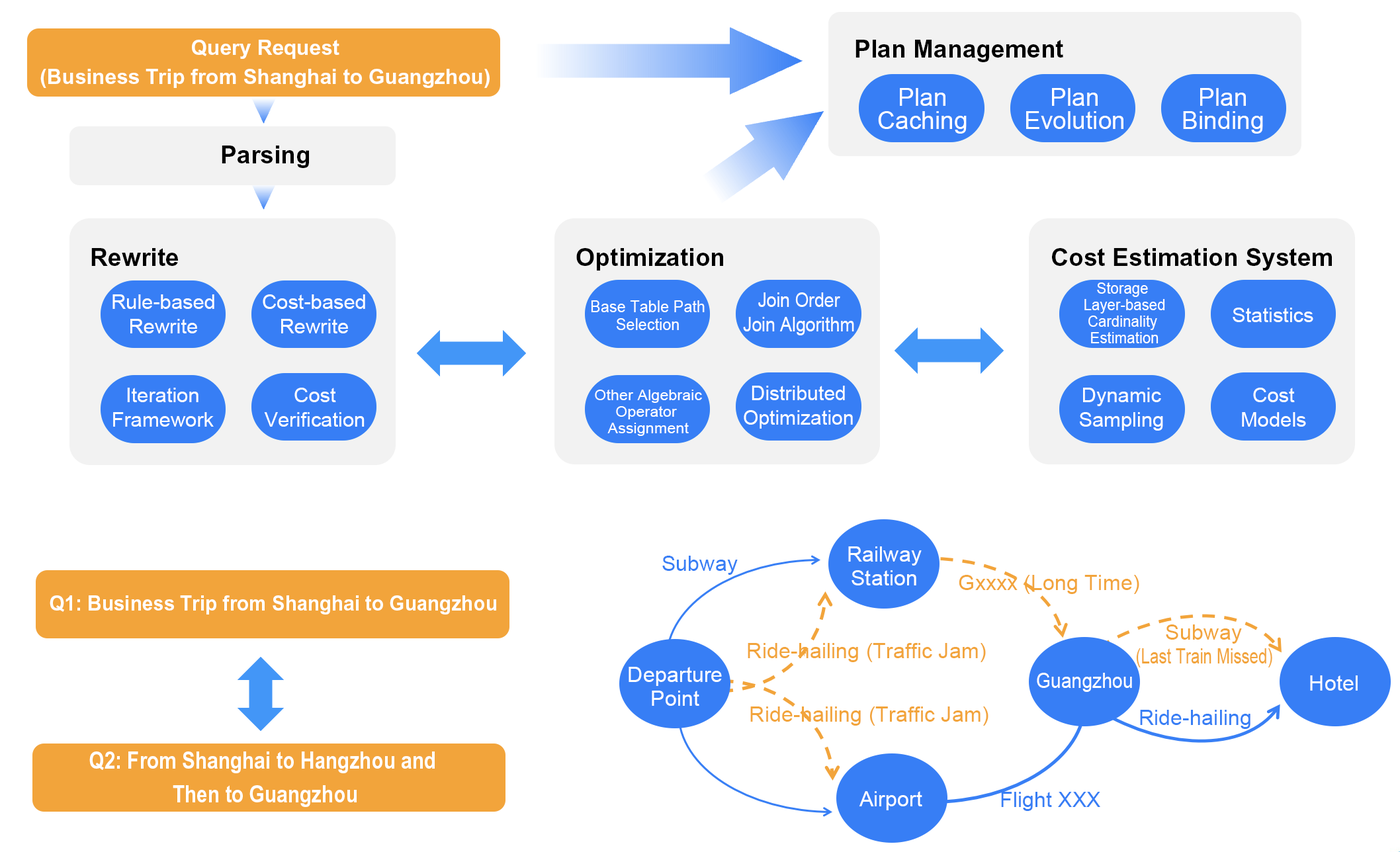
<style>
.page{position:relative;width:1400px;height:852px;background:#ffffff}
.page>*{position:absolute;margin:0}
.t1{font:20.9px/28.6px "Arial-BoldMT";color:#ffffff}
.t2{font:24.7px "Arial-BoldMT";color:#000000}
.t3{font:24.7px/23px "ArialMT";color:#ffffff}
.t4{font:20.4px/24.5px "ArialMT";color:#ffffff;scale:0.86 1}
.t5{font:15.2px/16.5px "ArialMT";color:#ffffff;scale:0.97 1}
.t6{font:20.4px/24.5px "ArialMT";color:#ffffff}
.t7{font:16.5px/17.9px "ArialMT";color:#ffffff;scale:0.94 1}
.t8{font:20.4px "ArialMT";color:#ffffff}
.t9{font:14.6px/16.5px "ArialMT";color:#ffffff;scale:1.07 1}
.t10{font:21.5px "ArialMT";color:#377ef5}
.t11{font:21.5px/23.6px "ArialMT";color:#ffffff}
.t12{font:21.5px "ArialMT";color:#f2a43b}
.t13{font:20.9px "Arial-BoldMT";color:#ffffff;scale:0.94 1}
.t14{font:21.5px "ArialMT";color:#f2a43b;scale:0.75 1}
.t15{font:21.5px "ArialMT";color:#ffffff;scale:0.88 1}
.t16{font:21.5px "ArialMT";color:#ffffff}
.t17{font:23.7px/33.5px "Arial-BoldMT";color:#ffffff;scale:0.83 1}
</style>
<div class="page">
<p class="t1" style="left:40px;top:40px;width:449px;height:49px;text-align:center">Query Request<br>(Business Trip from Shanghai to Guangzhou)</p>
<p class="t2" style="left:855px;top:40px;width:208px;height:22px">Plan Management</p>
<p class="t3" style="left:878px;top:88px;width:88px;height:46px;text-align:center">Plan<br>Caching</p>
<p class="t3" style="left:1026px;top:88px;width:97px;height:41px;text-align:center">Plan<br>Evolution</p>
<p class="t3" style="left:1183px;top:88px;width:80px;height:46px;text-align:center">Plan<br>Binding</p>
<p class="t2" style="left:222px;top:146px;width:87px;height:22px">Parsing</p>
<p class="t2" style="left:91px;top:248px;width:87px;height:18px">Rewrite</p>
<p class="t2" style="left:576px;top:248px;width:147px;height:23px">Optimization</p>
<p class="t2" style="left:1052px;top:248px;width:280px;height:23px">Cost Estimation System</p>
<p class="t4" style="left:743px;top:292px;width:111px;height:43px;text-align:center">Join Order<br>Join Algorithm</p>
<p class="t5" style="left:1084px;top:282px;width:81px;height:61px;text-align:center">Storage <br>Layer-based<br>Cardinality <br>Estimation</p>
<p class="t6" style="left:112px;top:294px;width:102px;height:39px;text-align:center">Rule-based<br>Rewrite</p>
<p class="t6" style="left:263px;top:294px;width:102px;height:39px;text-align:center">Cost-based<br>Rewrite</p>
<p class="t7" style="left:591px;top:300px;width:113px;height:30px;text-align:center">Base Table Path<br>Selection</p>
<p class="t8" style="left:1232px;top:308px;width:81px;height:14px">Statistics</p>
<p class="t6" style="left:113px;top:388px;width:101px;height:39px;text-align:center">Iteration<br>Framework</p>
<p class="t6" style="left:264px;top:388px;width:100px;height:39px;text-align:center">Cost<br>Verification</p>
<p class="t9" style="left:595px;top:390px;width:107px;height:46px;text-align:center">Other Algebraic<br>Operator <br>Assignment</p>
<p class="t6" style="left:743px;top:386px;width:110px;height:43px;text-align:center">Distributed<br>Optimization</p>
<p class="t6" style="left:1079px;top:388px;width:84px;height:43px;text-align:center">Dynamic<br>Sampling</p>
<p class="t6" style="left:1242px;top:388px;width:64px;height:39px;text-align:center">Cost<br>Models</p>
<p class="t10" style="left:662px;top:556px;width:76px;height:19px">Subway</p>
<p class="t11" style="left:848px;top:546px;width:73px;height:39px;text-align:center">Railway<br>Station</p>
<p class="t12" style="left:958px;top:575px;width:181px;height:19px">Gxxxx (Long Time)</p>
<p class="t13" style="left:50px;top:595px;width:446px;height:19px">Q1: Business Trip from Shanghai to Guangzhou</p>
<p class="t12" style="left:1165px;top:624px;width:77px;height:20px">Subway</p>
<p class="t12" style="left:747px;top:643px;width:239px;height:19px">Ride-hailing (Traffic Jam)</p>
<p class="t14" style="left:1136px;top:648px;width:136px;height:19px">(Last Train Missed)</p>
<p class="t11" style="left:628px;top:667px;width:94px;height:39px;text-align:center">Departure<br>Point</p>
<p class="t15" style="left:1037px;top:673px;width:95px;height:19px">Guangzhou</p>
<p class="t16" style="left:1310px;top:675px;width:47px;height:16px">Hotel</p>
<p class="t12" style="left:750px;top:706px;width:238px;height:20px">Ride-hailing (Traffic Jam)</p>
<p class="t10" style="left:1140px;top:710px;width:110px;height:19px">Ride-hailing</p>
<p class="t17" style="left:89px;top:751px;width:346px;height:56px;text-align:center">Q2: From Shanghai to Hangzhou and <br>Then to Guangzhou</p>
<p class="t16" style="left:859px;top:791px;width:63px;height:19px">Airport</p>
<p class="t10" style="left:1001px;top:792px;width:99px;height:19px">Flight XXX</p>
</div>
